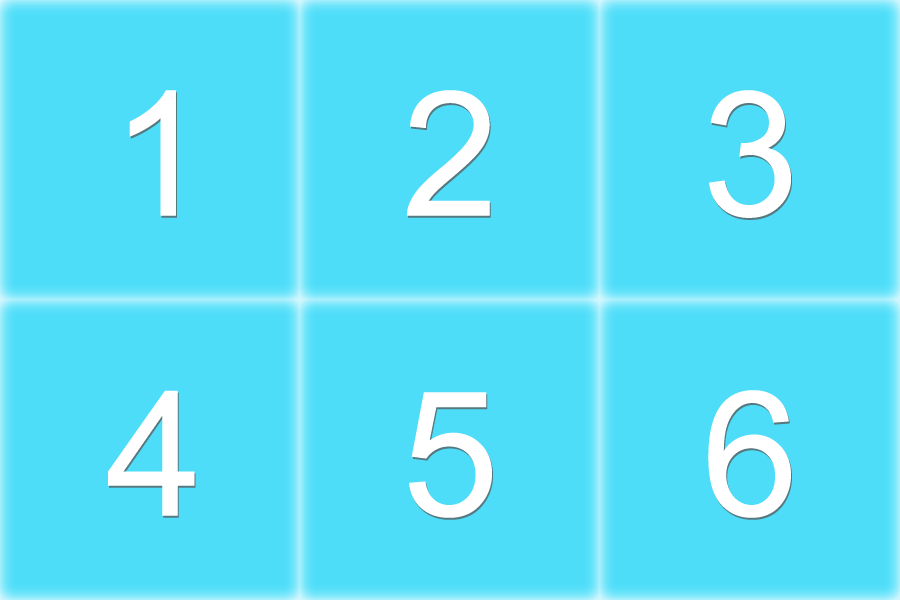
<style>
.page{position:relative;width:900px;height:600px;background:#4dddf9}
.page>*{position:absolute;margin:0}
.t1{font:174.4px "ArialMT";color:#ffffff}
</style>
<div class="page">
<p class="t1" style="left:129px;top:90px;width:47px;height:126px">1</p>
<p class="t1" style="left:407px;top:90px;width:83px;height:126px">2</p>
<p class="t1" style="left:709px;top:90px;width:82px;height:128px">3</p>
<p class="t1" style="left:108px;top:390px;width:87px;height:126px">4</p>
<p class="t1" style="left:708px;top:390px;width:83px;height:128px">6</p>
<p class="t1" style="left:409px;top:392px;width:83px;height:126px">5</p>
</div>
